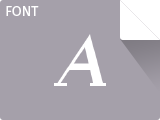
<style>
.page{position:relative;width:160px;height:120px;background:#a5a0aa}
.page>*{position:absolute;margin:0}
.t1{font:14px "FiraSans-Regular";color:#ffffff}
</style>
<div class="page">
<p class="t1" style="left:6px;top:6px;width:33px;height:10px">FONT</p>
</div>
